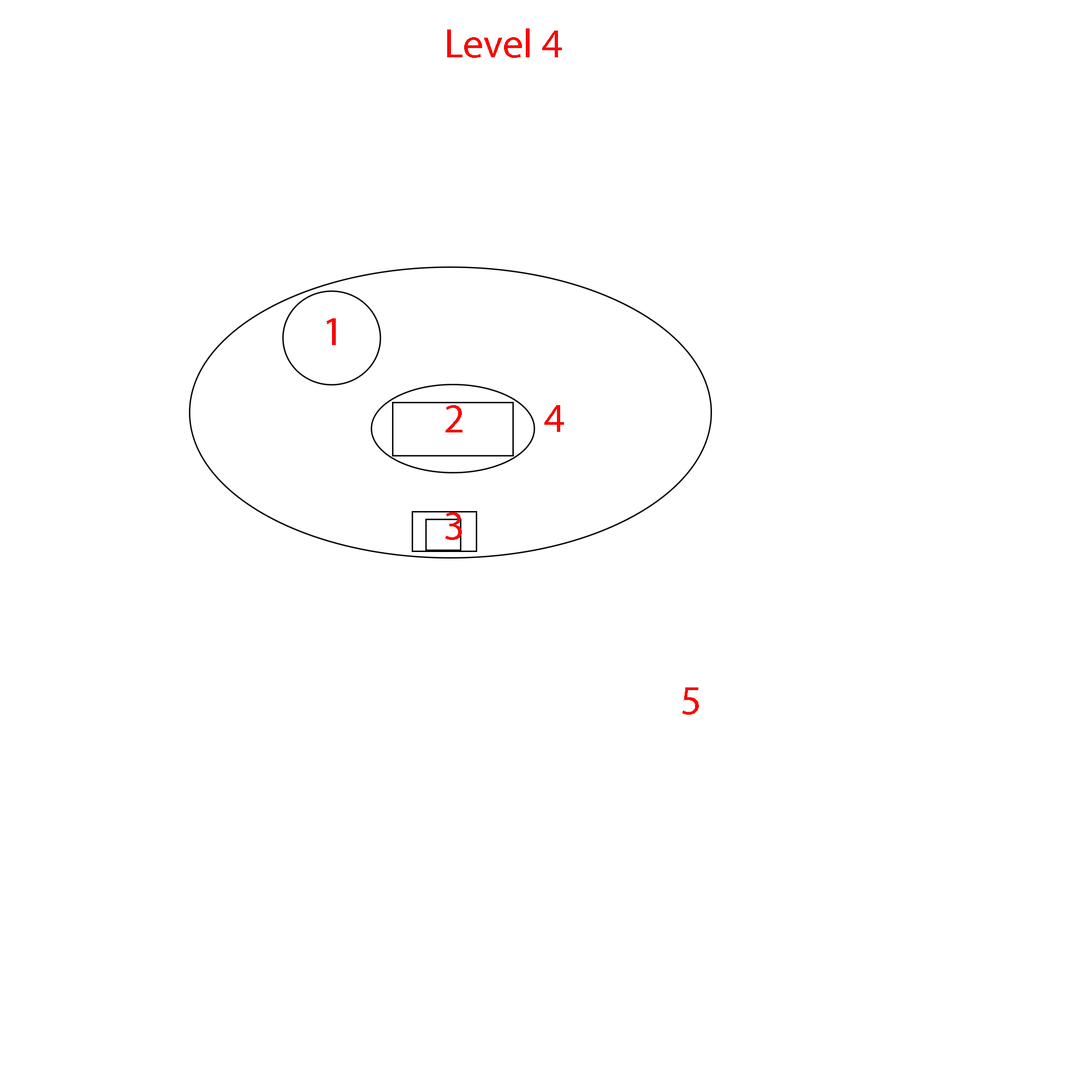
<style>
.page{position:relative;width:1092px;height:1092px;background:#ffffff}
.page>*{position:absolute;margin:0}
.t1{font:40.9px "MyriadPro-Regular";color:#f40a0a}
</style>
<div class="page">
<p class="t1" style="left:447px;top:28px;width:115px;height:30px">Level 4</p>
<p class="t1" style="left:327px;top:318px;width:9px;height:27px">1</p>
<p class="t1" style="left:446px;top:405px;width:16px;height:27px">2</p>
<p class="t1" style="left:544px;top:405px;width:20px;height:27px">4</p>
<p class="t1" style="left:445px;top:512px;width:17px;height:28px">3</p>
<p class="t1" style="left:682px;top:687px;width:17px;height:28px">5</p>
</div>
